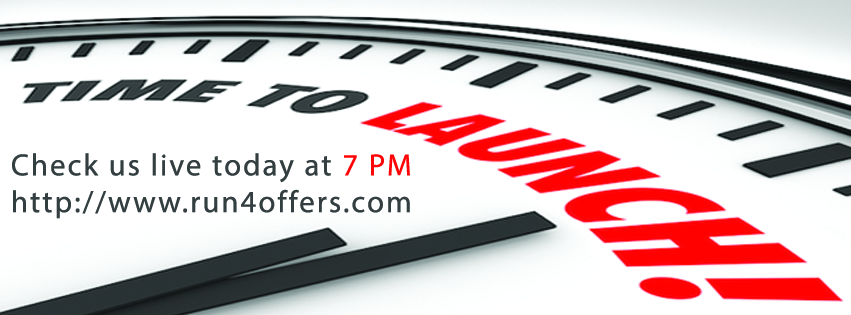
<style>
.page{position:relative;width:851px;height:315px;background:#ffffff}
.page>*{position:absolute;margin:0}
.t1{font:30.7px "MyriadPro-Regular";letter-spacing:0.07em;color:#333e40}
.t2{font:30.7px "MyriadPro-Regular";letter-spacing:0.07em;color:#fe0406}
</style>
<div class="page">
<p class="t1" style="left:12px;top:153px;width:398px;height:66px;text-align:right">Check us live today at <span class="t2">7 PM<br></span>http://www.run4offers.com</p>
</div>
